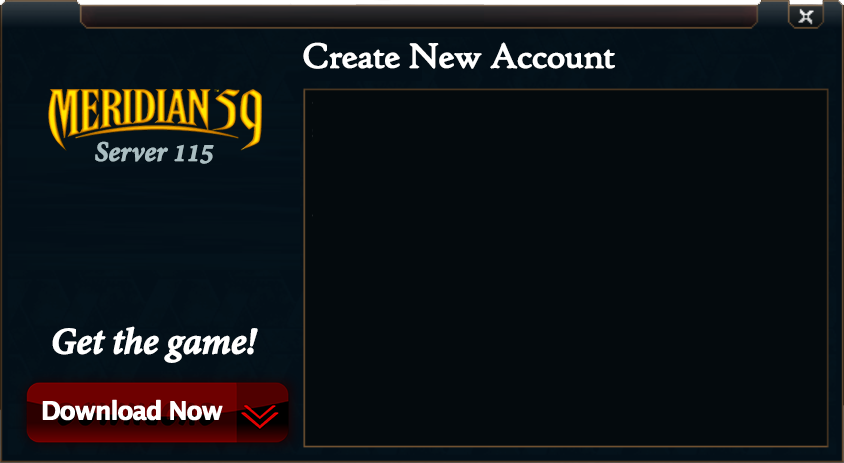
<style>
.page{position:relative;width:844px;height:463px;background:#040a0d}
.page>*{position:absolute;margin:0}
.t1{font:37px "HighTowerText-Reg";letter-spacing:-0.05em;color:#ffffff;font-weight:bold}
.t2{font:30px "AdobeDevanagari-BoldItalic";letter-spacing:-0.01em;color:#aabec2;font-weight:bold}
.t3{font:40px "AdobeDevanagari-BoldItalic";letter-spacing:-0.01em;color:#ffffff;font-weight:bold}
</style>
<div class="page">
<p class="t1" style="left:303px;top:42px;width:312px;height:27px">Create New Account</p>
<p class="t2" style="left:95px;top:141px;width:119px;height:23px">Server 115</p>
<p class="t3" style="left:52px;top:326px;width:206px;height:37px">Get the game!</p>
</div>
